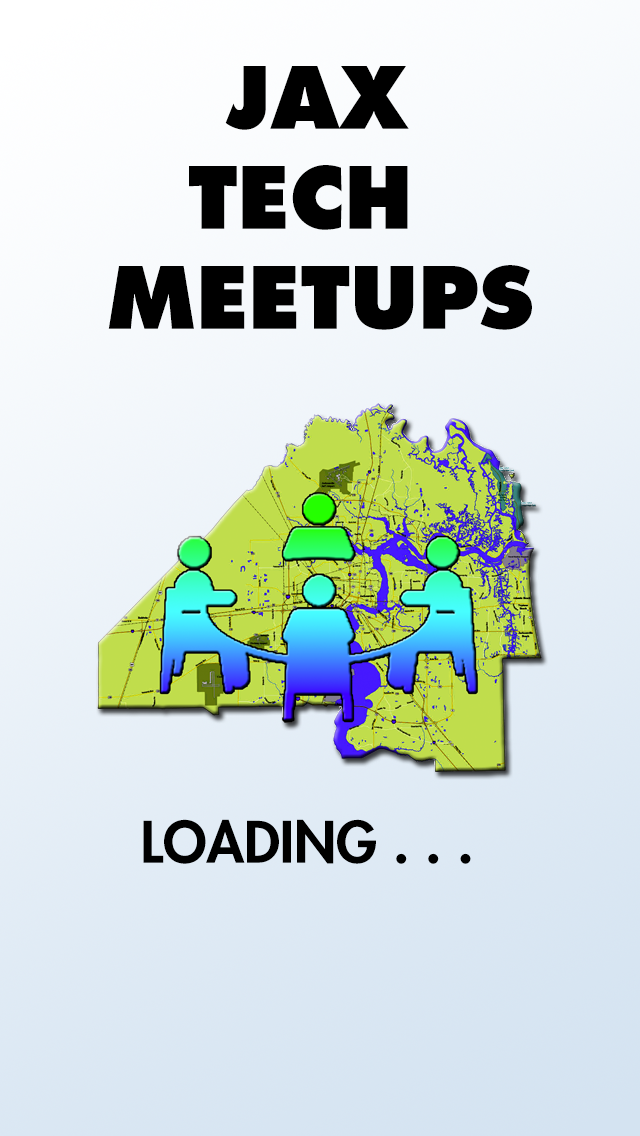
<style>
.page{position:relative;width:640px;height:1136px}
.page>*{position:absolute;margin:0}
.t1{font:83.3px "FuturaStd-ExtraBold";color:#000000;text-transform:uppercase}
.t2{font:55.6px "FuturaStd-Heavy";color:#000000;text-transform:uppercase}
</style>
<div class="page">
<p class="t1" style="left:108px;top:66px;width:424px;height:264px;text-align:center">Jax<br>Tech <br>Meetups</p>
<p class="t2" style="left:143px;top:819px;width:328px;height:45px">Loading . . .</p>
</div>
